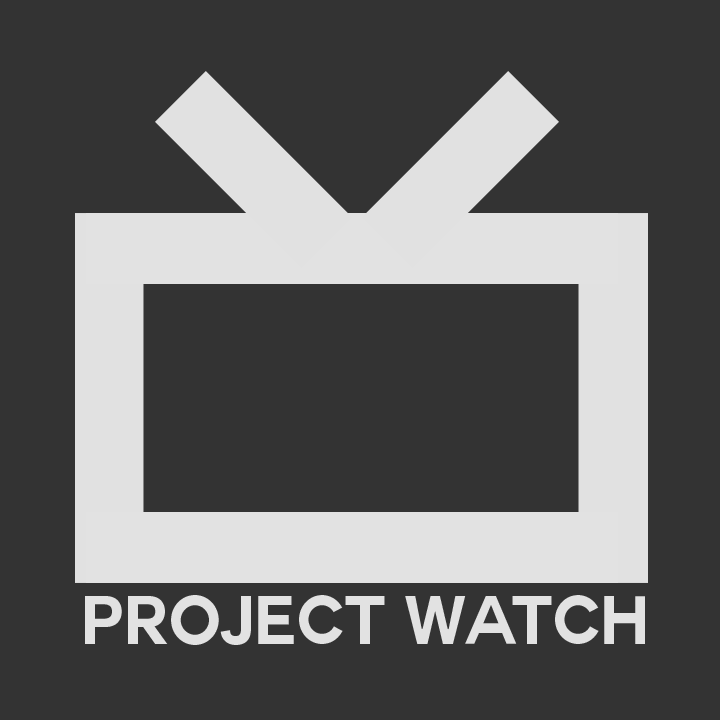
<style>
.page{position:relative;width:720px;height:720px;background:#333333}
.page>*{position:absolute;margin:0}
.t1{font:116.3px "Couture-Bold";color:#e2e2e2;scale:0.94 1}
</style>
<div class="page">
<p class="t1" style="left:85px;top:595px;width:560px;height:50px">PROJECT WATCH</p>
</div>
